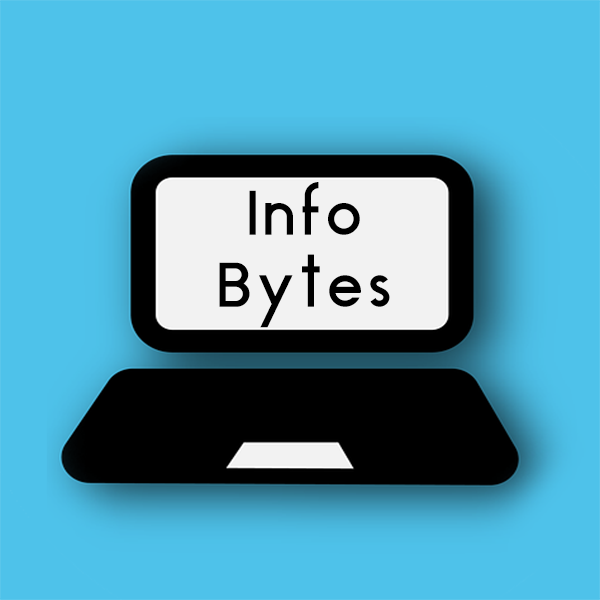
<style>
.page{position:relative;width:600px;height:600px;background:#4ec2ea}
.page>*{position:absolute;margin:0}
.t1{font:60px "AquaGrotesque";color:#000000}
</style>
<div class="page">
<p class="t1" style="left:219px;top:182px;width:171px;height:146px;text-align:center">Info    Bytes</p>
</div>
